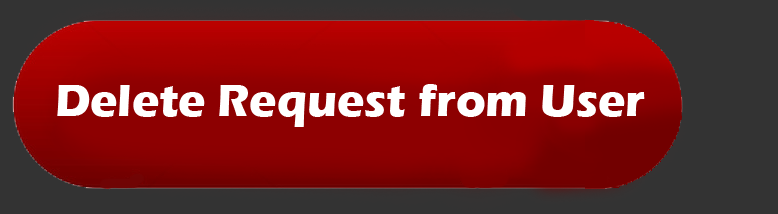
<style>
.page{position:relative;width:778px;height:214px;background:#333333}
.page>*{position:absolute;margin:0}
.t1{font:46px "ErasITC-Bold";color:#ffffff}
</style>
<div class="page">
<p class="t1" style="left:57px;top:84px;width:588px;height:43px">Delete Request from User</p>
</div>
